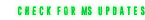
<style>
.page{position:relative;width:145px;height:20px;background:#ffffff}
.page>*{position:absolute;margin:0}
.t1{font:12px "Sunzoomspark";color:#00d03b}
</style>
<div class="page">
<p class="t1" style="left:18px;top:6px;width:127px;height:10px">C H E C K  F O R  MS  U P D A T E S</p>
</div>
